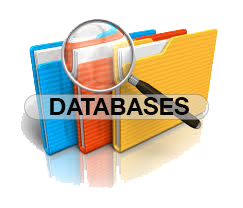
<style>
.page{position:relative;width:243px;height:208px;background:#ffffff}
.page>*{position:absolute;margin:0}
.t1{font:24px "HelveticaNeue-Bold";color:#060606}
</style>
<div class="page">
<p class="t1" style="left:50px;top:97px;width:139px;height:18px">DATABASES</p>
</div>
